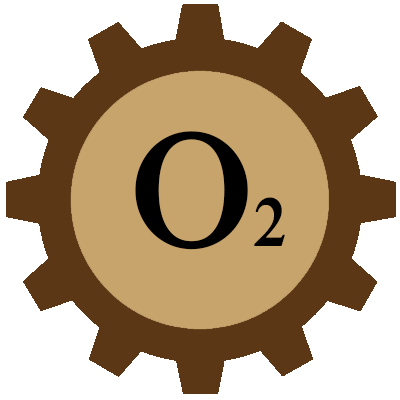
<style>
.page{position:relative;width:400px;height:400px;background:#ffffff}
.page>*{position:absolute;margin:0}
.t1{font:170px "IskoolaPota-Bold";color:#000000;scale:0.9 1}
.t2{font:72px "IskoolaPota-Bold";color:#000000;scale:0.9 1}
</style>
<div class="page">
<p class="t1" style="left:135px;top:131px;width:150px;height:119px">O<span class="t2">2</span></p>
</div>
